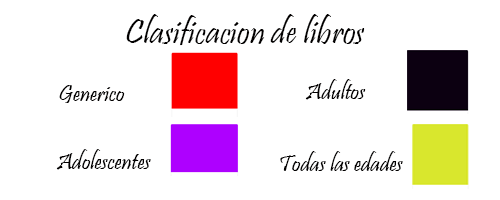
<style>
.page{position:relative;width:500px;height:200px;background:#ffffff}
.page>*{position:absolute;margin:0}
.t1{font:36px "Pristina-Regular";color:#020000}
.t2{font:24px "Pristina-Regular";color:#020000}
</style>
<div class="page">
<p class="t1" style="left:126px;top:14px;width:239px;height:39px">Clasificacion de libros</p>
<p class="t2" style="left:59px;top:85px;width:66px;height:18px">Generico</p>
<p class="t2" style="left:305px;top:79px;width:61px;height:21px">Adultos</p>
<p class="t2" style="left:56px;top:149px;width:95px;height:21px">Adolescentes</p>
<p class="t2" style="left:280px;top:151px;width:123px;height:20px">Todas las edades</p>
</div>
